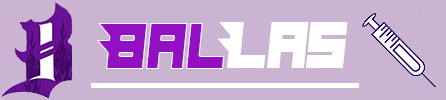
<style>
.page{position:relative;width:446px;height:100px;background:#cbb4d1}
.page>*{position:absolute;margin:0}
.t1{font:66.7px "Hindsight2020";color:#9210c2;scale:0.94 1}
.t2{font:66.7px "Hindsight2020";color:#ffffff;scale:0.94 1}
</style>
<div class="page">
<p class="t1" style="left:96px;top:23px;width:129px;height:46px">Bal</p>
<p class="t2" style="left:217px;top:22px;width:131px;height:46px">Las</p>
</div>
